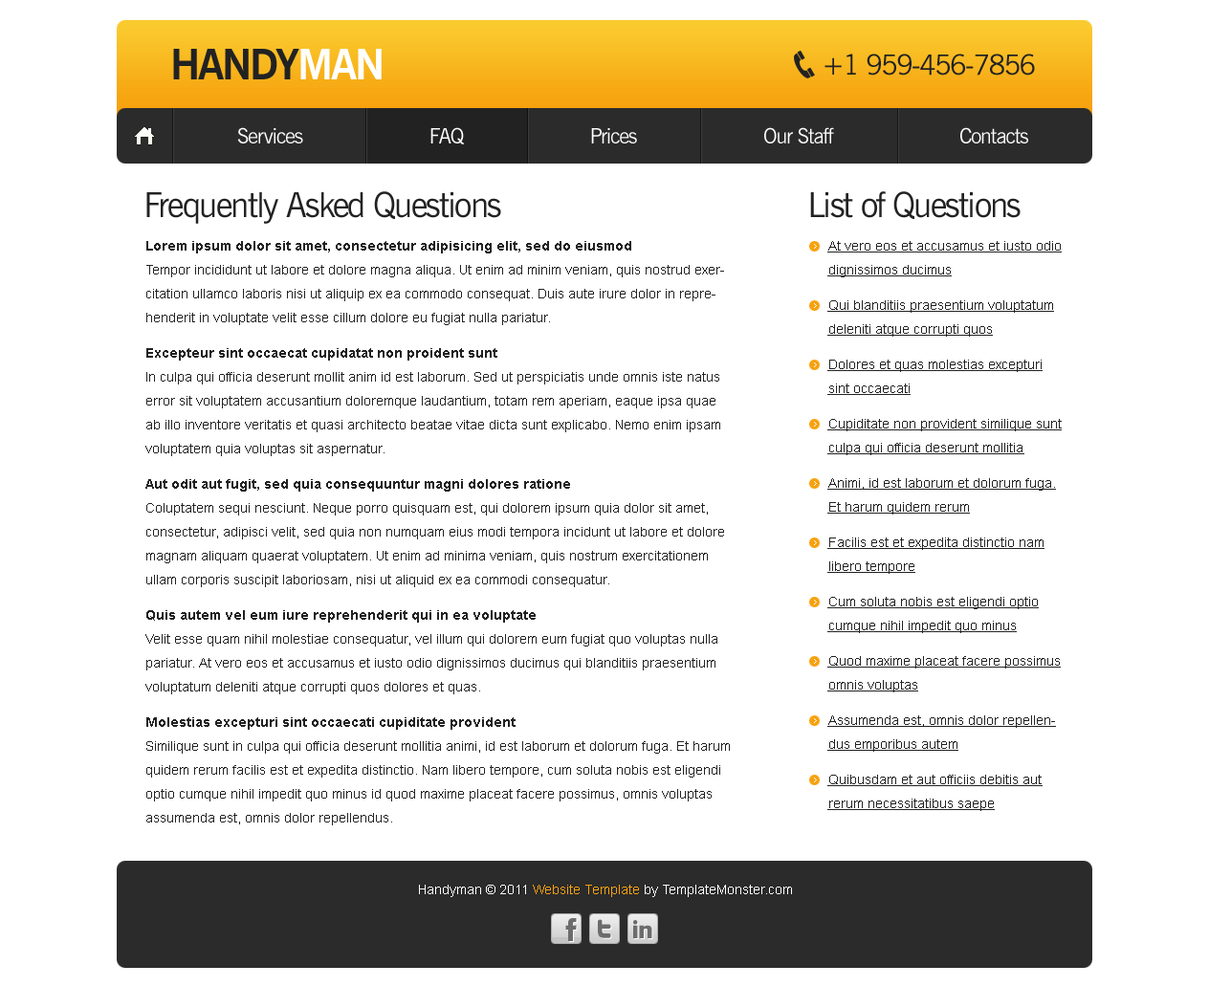
<style>
.page{position:relative;width:1209px;height:987px;background:#ffffff}
.page>*{position:absolute;margin:0}
.t1{font:42.1px "NewsGothicBT-Bold";letter-spacing:-0.05em;color:#222222;text-transform:uppercase}
.t2{font:42.1px "NewsGothicBT-Bold";letter-spacing:-0.05em;color:#ffffff;text-transform:uppercase}
.t3{font:27.7px "NewsGothicBT-Roman";letter-spacing:-0.05em;color:#222222;text-transform:uppercase}
.t4{font:21px "NewsGothicBT-Roman";letter-spacing:-0.05em;color:#ffffff}
.t5{font:34.4px "NewsGothicBT-Roman";letter-spacing:-0.05em;color:#222222}
.t6{font:13.4px/23.9px "ArialMT";color:#222222}
.t7{font:13.4px/23.9px "Arial-BoldMT";color:#222222}
.t8{font:13.4px/35.4px "Arial-BoldMT";color:#222222}
.t9{font:13.4px/23.9px "ArialMT";color:#222222;text-decoration:underline}
.t10{font:13.4px/35.4px "ArialMT";color:#222222;text-decoration:underline}
.t11{font:13.4px "ArialMT";color:#ffffff}
.t12{font:13.4px "ArialMT";color:#f6a20e}
</style>
<div class="page">
<p class="t1" style="left:173px;top:49px;width:208px;height:30px">Handy<span class="t2">man</span></p>
<p class="t3" style="left:824px;top:54px;width:211px;height:22px">+1 959-456-7856</p>
<p class="t4" style="left:237px;top:127px;width:791px;height:17px">Services                        FAQ                        Prices                        Our Staff                        Contacts</p>
<p class="t5" style="left:146px;top:191px;width:355px;height:33px">Frequently Asked Questions</p>
<p class="t5" style="left:810px;top:191px;width:210px;height:28px">List of Questions</p>
<p class="t6" style="left:145px;top:241px;width:585px;height:584px"><span class="t7">Lorem ipsum dolor sit amet, consectetur adipisicing elit, sed do eiusmod</span> <br>Tempor incididunt ut labore et dolore magna aliqua. Ut enim ad minim veniam, quis nostrud exercitation ullamco laboris nisi ut aliquip ex ea commodo consequat. Duis aute irure dolor in reprehenderit in voluptate velit esse cillum dolore eu fugiat nulla pariatur. <br><span class="t8">E</span><span class="t7">xcepteur sint occaecat cupidatat non proident sunt</span> <br>In culpa qui officia deserunt mollit anim id est laborum. Sed ut perspiciatis unde omnis iste natus error sit voluptatem accusantium doloremque laudantium, totam rem aperiam, eaque ipsa quae ab illo inventore veritatis et quasi architecto beatae vitae dicta sunt explicabo. Nemo enim ipsam voluptatem quia voluptas sit aspernatur.<br><span class="t8">A</span><span class="t7">ut odit aut fugit, sed quia consequuntur magni dolores ratione</span> <br>Coluptatem sequi nesciunt. Neque porro quisquam est, qui dolorem ipsum quia dolor sit amet, consectetur, adipisci velit, sed quia non numquam eius modi tempora incidunt ut labore et dolore magnam aliquam quaerat voluptatem. Ut enim ad minima veniam, quis nostrum exercitationem ullam corporis suscipit laboriosam, nisi ut aliquid ex ea commodi consequatur.<br><span class="t8">Q</span><span class="t7">uis autem vel eum iure reprehenderit qui in ea voluptate</span> <br>Velit esse quam nihil molestiae consequatur, vel illum qui dolorem eum fugiat quo voluptas nulla pariatur. At vero eos et accusamus et iusto odio dignissimos ducimus qui blanditiis praesentium voluptatum deleniti atque corrupti quos dolores et quas.<br><span class="t8">M</span><span class="t7">olestias excepturi sint occaecati cupiditate provident</span><br>Similique sunt in culpa qui officia deserunt mollitia animi, id est laborum et dolorum fuga. Et harum quidem rerum facilis est et expedita distinctio. Nam libero tempore, cum soluta nobis est eligendi optio cumque nihil impedit quo minus id quod maxime placeat facere possimus, omnis voluptas assumenda est, omnis dolor repellendus.<br> Temporibus autem quibusdam et aut officiis debitis aut rerum necessitatibus saepe eveniet ut et voluptates repudiandae sint et molestiae non recusandae. Itaque earum rerum hic tenetur a sapiente delectus, ut aut reiciendis voluptatibus maiores alias consequatur aut perferendis doloribus asperiores repellat.</p>
<p class="t9" style="left:827px;top:241px;width:234px;height:570px">At vero eos et accusamus et iusto odio dignissimos ducimus<br><span class="t10">Q</span>ui blanditiis praesentium voluptatum deleniti atque corrupti quos<br><span class="t10">D</span>olores et quas molestias excepturi sint occaecati<br><span class="t10">C</span>upiditate non provident similique sunt culpa qui officia deserunt mollitia<br><span class="t10">A</span>nimi, id est laborum et dolorum fuga. Et harum quidem rerum<br><span class="t10">F</span>acilis est et expedita distinctio nam libero tempore<br><span class="t10">C</span>um soluta nobis est eligendi optio cumque nihil impedit quo minus<br><span class="t10">Q</span>uod maxime placeat facere possimus omnis voluptas<br><span class="t10">A</span>ssumenda est, omnis dolor repellendus emporibus autem<br><span class="t10">Q</span>uibusdam et aut officiis debitis aut rerum necessitatibus saepe<br> eveniet ut et voluptates repudiandae sint et molestiae non recusandae. Itaque earum rerum hic tenetur a sapiente delectus, ut aut reiciendis voluptatibus maiores alias consequatur aut perferendis doloribus asperiores repellat.</p>
<p class="t11" style="left:419px;top:884px;width:373px;height:13px">Handyman © 2011 <span class="t12">Website Template</span> by TemplateMonster.com</p>
</div>
